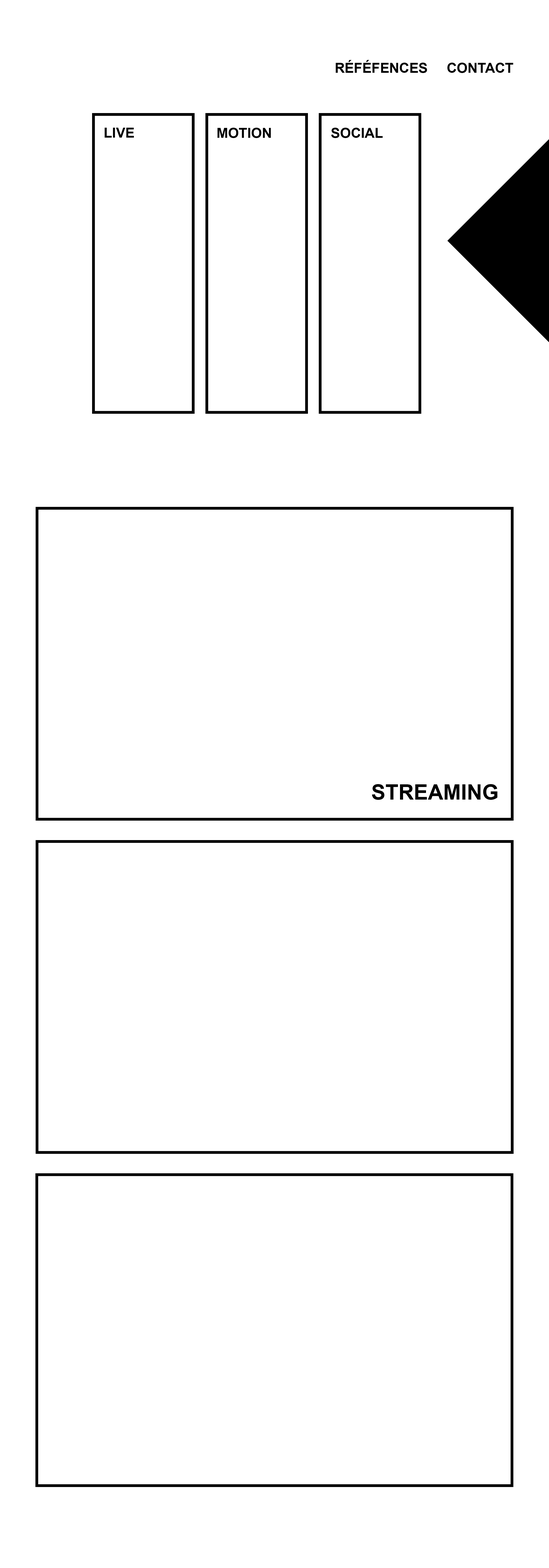
<style>
.page{position:relative;width:549px;height:1568px;background:#ffffff}
.page>*{position:absolute;margin:0}
.t1{font:13.8px "Arial-BoldMT";color:#000000}
.t2{font:21.2px "Arial-BoldMT";color:#000000}
</style>
<div class="page">
<p class="t1" style="left:335px;top:60px;width:92px;height:13px">RÉFÉFENCES</p>
<p class="t1" style="left:447px;top:63px;width:66px;height:10px">CONTACT</p>
<p class="t1" style="left:104px;top:128px;width:30px;height:10px">LIVE</p>
<p class="t1" style="left:217px;top:128px;width:54px;height:10px">MOTION</p>
<p class="t1" style="left:331px;top:128px;width:52px;height:10px">SOCIAL</p>
<p class="t2" style="left:372px;top:784px;width:125px;height:16px">STREAMING</p>
</div>
